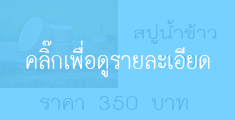
<style>
.page{position:relative;width:235px;height:120px;background:#75d1ff}
.page>*{position:absolute;margin:0}
.t1{font:23.6px "THK2DJuly8";color:#5cb8e6;scale:1.27 1}
.t2{font:36px "THK2DJuly8";color:#ffffff;scale:0.83 1}
.t3{font:30px "THK2DJuly8";color:#5cb8e6}
</style>
<div class="page">
<p class="t1" style="left:134px;top:20px;width:83px;height:48px;text-align:center">สบู่น้ำข้าว<br>100%</p>
<p class="t2" style="left:26px;top:40px;width:184px;height:37px">คลิ๊กเพื่อดูรายละเอียด</p>
<p class="t3" style="left:40px;top:96px;width:148px;height:14px">ราคา 350 บาท</p>
</div>
